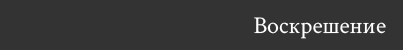
<style>
.page{position:relative;width:403px;height:50px;background:#333333}
.page>*{position:absolute;margin:0}
.t1{font:24px "CrimsonText-Regular";color:#ffffff}
</style>
<div class="page">
<p class="t1" style="left:254px;top:17px;width:132px;height:22px">Воскрешение</p>
</div>
